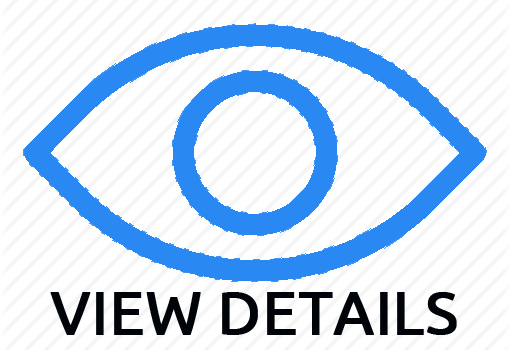
<style>
.page{position:relative;width:511px;height:350px;background:#ffffff}
.page>*{position:absolute;margin:0}
.t1{font:60px "Ubuntu";color:#000409;font-weight:bold}
</style>
<div class="page">
<p class="t1" style="left:50px;top:292px;width:407px;height:43px">VIEW DETAILS</p>
</div>
